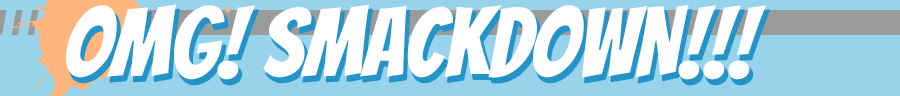
<style>
.page{position:relative;width:900px;height:96px;background:#97d4ec}
.page>*{position:absolute;margin:0}
.t1{font:96px "Bangers";color:#ffffff}
</style>
<div class="page">
<p class="t1" style="left:66px;top:4px;width:701px;height:76px">OMG! SMACKDOWN!!!</p>
</div>
